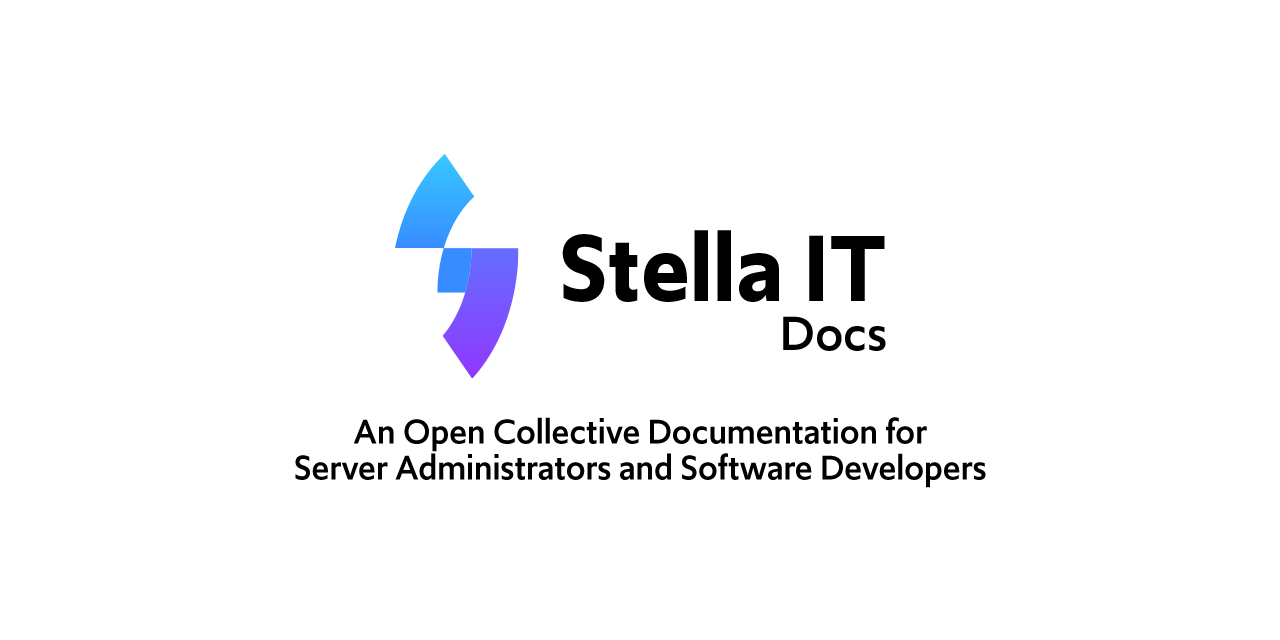
<style>
.page{position:relative;width:1280px;height:640px;background:#ffffff}
.page>*{position:absolute;margin:0}
.t1{font:36px/36px "Upgrade-Medium";color:#000000}
</style>
<div class="page">
<p class="t1" style="left:295px;top:417px;width:691px;height:71px;text-align:center">An Open Collective Documentation for<br>Server Administrators and Software Developers</p>
</div>
